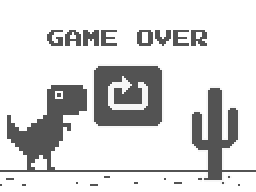
<style>
.page{position:relative;width:256px;height:192px;background:#ffffff}
.page>*{position:absolute;margin:0}
.t1{font:18px "PressStart2P";color:#535353}
</style>
<div class="page">
<p class="t1" style="left:47px;top:30px;width:160px;height:16px">GAME OVER</p>
</div>
